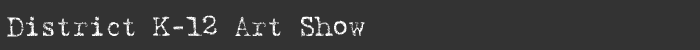
<style>
.page{position:relative;width:700px;height:50px;background:#333333}
.page>*{position:absolute;margin:0}
.t1{font:28px "Harting-Plain";letter-spacing:-0.025em;color:#ffffff}
</style>
<div class="page">
<p class="t1" style="left:7px;top:15px;width:358px;height:22px">District K-12 Art Show</p>
</div>
